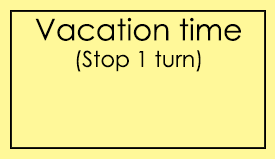
<style>
.page{position:relative;width:275px;height:159px;background:#fff899}
.page>*{position:absolute;margin:0}
.t1{font:30px "CenturyGothic";color:#000000}
.t2{font:22px "CenturyGothic";color:#000000}
</style>
<div class="page">
<p class="t1" style="left:35px;top:17px;width:206px;height:55px;text-align:center">Vacation time<br><span class="t2">(Stop 1 turn)</span></p>
</div>
